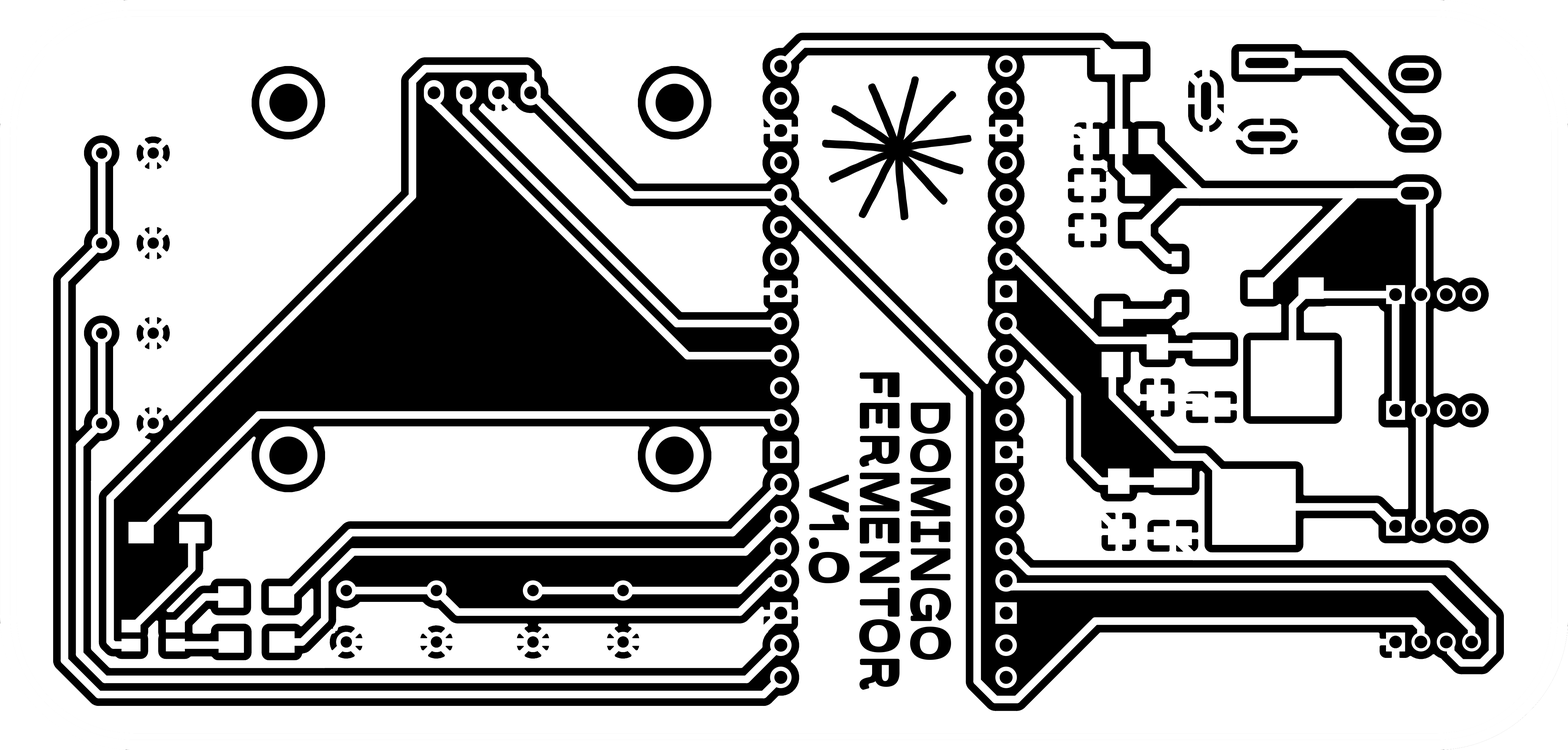
<style>
.page{position:relative;width:1568px;height:750px;background:#ffffff}
.page>*{position:absolute;margin:0}
.t1{font:50.8px/50.8px "Savate-";color:#000000}
</style>
<div class="page">
<p class="t1" style="left:810px;top:374px;width:140px;height:315px;text-align:center;rotate:90deg">DOMINGO<br>FERMENTOR<br>V1.0</p>
</div>
